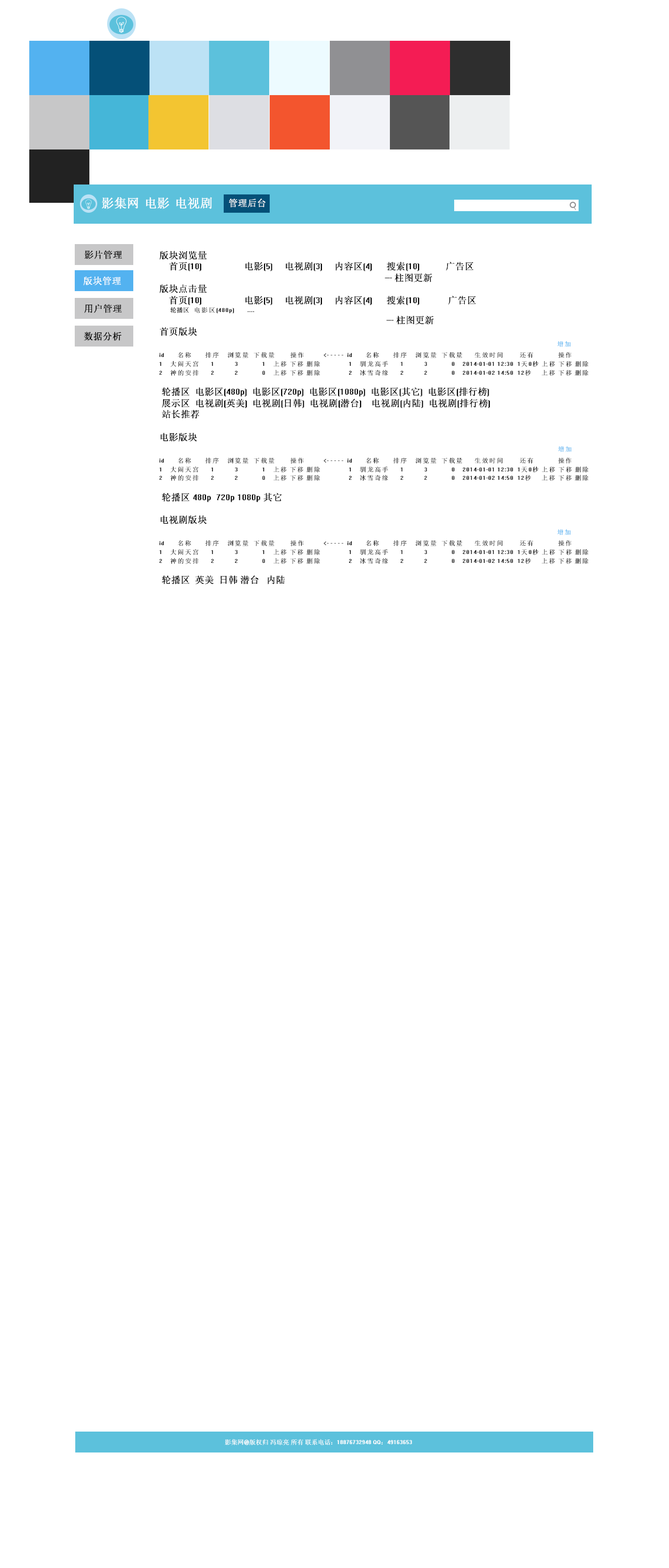
<style>
.page{position:relative;width:669px;height:1568px;background:#ffffff}
.page>*{position:absolute;margin:0}
.t1{font:12.5px "System";color:#ffffff}
.t2{font:12.6px "System";color:#ffffff}
.t3{font:9.4px "System";color:#ffffff}
.t4{font:9.4px "System";color:#000000}
.t5{font:7.3px "System";color:#000000}
.t6{font:6.3px "System";color:#000000}
.t7{font:7.3px "System";color:#53b2f0}
.t8{font:6.3px "System";color:#ffffff}
</style>
<div class="page">
<p class="t1" style="left:102px;top:197px;width:37px;height:12px">影集网</p>
<p class="t2" style="left:146px;top:197px;width:23px;height:12px">电影</p>
<p class="t2" style="left:176px;top:197px;width:36px;height:12px">电视剧</p>
<p class="t3" style="left:229px;top:199px;width:37px;height:8px">管理后台</p>
<p class="t4" style="left:84px;top:250px;width:38px;height:9px">影片管理</p>
<p class="t5" style="left:159px;top:251px;width:430px;height:333px"><span class="t4">版块浏览量<br>    首页(10)                  电影(5)     电视剧(3)     内容区(4)      搜索(10)           广告区<br>                                                                                                --- 柱图更新<br>版块点击量<br>    首页(10)                  电影(5)     电视剧(3)     内容区(4)      搜索(10)            广告区<br>       </span><span class="t6">轮播区   </span>电影区(480p)       ....<br>                                                                                                                                                 <span class="t4">--- 柱图更新<br>首页版块<br>                                                                                                                                                                                                 </span><span class="t7">增加<br></span>id       名称       排序    浏览量  下载量        操作          &lt;- - - - -  id       名称       排序    浏览量  下载量      生效时间       还有          操作<br>1    大闹天宫      1           3             1    上移 下移 删除               1    驯龙高手      1           3             0    2014-01-01 12:30  1天0秒 上移 下移 删除<br>2    神的安排      2           2             0    上移 下移 删除               2    冰雪奇缘      2           2             0    2014-01-02 14:50  12秒     上移 下移 删除<br>    <br><span class="t4"> 轮播区  电影区(480p)  电影区(720p)  电影区(1080p)  电影区(其它)  电影区(排行榜)<br> 展示区  电视剧(英美)  电视剧(日韩)  电视剧(潜台)    电视剧(内陆)  电视剧(排行榜)<br> 站长推荐<br> <br>电影版块<br>                                                                                                                                                                                                          </span><span class="t7">增加<br></span>id       名称       排序    浏览量  下载量        操作          &lt;- - - - -  id       名称       排序    浏览量  下载量      生效时间       还有          操作<br>1    大闹天宫      1           3             1    上移 下移 删除               1    驯龙高手      1           3             0    2014-01-01 12:30  1天0秒 上移 下移 删除<br>2    神的安排      2           2             0    上移 下移 删除               2    冰雪奇缘      2           2             0    2014-01-02 14:50  12秒     上移 下移 删除<br>    <br><span class="t4"> 轮播区 480p  720p 1080p 其它<br> <br>电视剧版块<br>                                                                                                                                                                                                 </span><span class="t7">增加<br></span>id       名称       排序    浏览量  下载量        操作          &lt;- - - - -  id       名称       排序    浏览量  下载量      生效时间       还有          操作<br>1    大闹天宫      1           3             1    上移 下移 删除               1    驯龙高手      1           3             0    2014-01-01 12:30  1天0秒 上移 下移 删除<br>2    神的安排      2           2             0    上移 下移 删除               2    冰雪奇缘      2           2             0    2014-01-02 14:50  12秒     上移 下移 删除<br>    <span class="t4"><br> 轮播区  英美  日韩 潜台   内陆</span></p>
<p class="t3" style="left:83px;top:276px;width:38px;height:9px">版块管理</p>
<p class="t4" style="left:84px;top:304px;width:38px;height:9px">用户管理</p>
<p class="t4" style="left:84px;top:332px;width:38px;height:9px">数据分析</p>
<p class="t8" style="left:225px;top:1439px;width:187px;height:6px">影集网@版权归 冯琼亮 所有 联系电话：18876732948 QQ：49163653</p>
</div>
